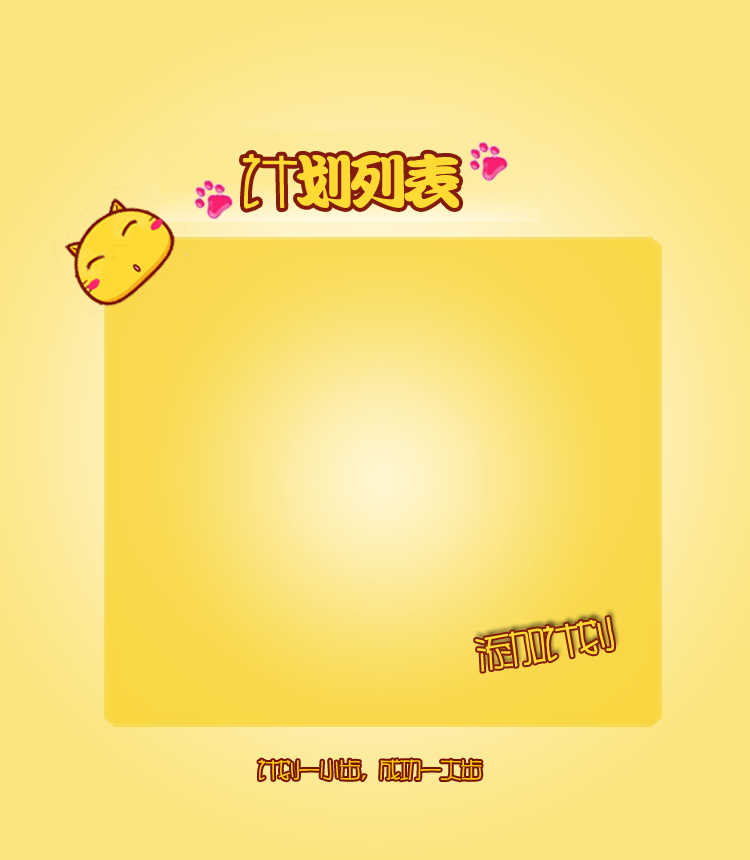
<style>
.page{position:relative;width:750px;height:860px}
.page>*{position:absolute;margin:0}
.t1{font:59px "DFKanTingLiu-XB-HK-BF";letter-spacing:-0.1em;color:#ffda33}
.t2{font:59px "HYr2gj";letter-spacing:-0.1em;color:#ffda33}
.t3{font:38px "HYr2gj";letter-spacing:-0.1em;color:#ffda33}
.t4{font:22.1px "HYr2gj";letter-spacing:-0.1em;color:#f5c907}
</style>
<div class="page">
<p class="t1" style="left:243px;top:153px;width:216px;height:56px"><span class="t2">计</span>划列表</p>
<p class="t3" style="left:475px;top:617px;width:139px;height:55px;rotate:-9deg">添加计划</p>
<p class="t4" style="left:258px;top:759px;width:224px;height:22px">计划一小步，成功一大步</p>
</div>
